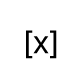
<style>
.page{position:relative;width:80px;height:80px;background:#ffffff}
.page>*{position:absolute;margin:0}
.t1{font:31.8px "DroidSans";color:#000000}
</style>
<div class="page">
<p class="t1" style="left:26px;top:30px;width:31px;height:29px">[x]</p>
</div>
